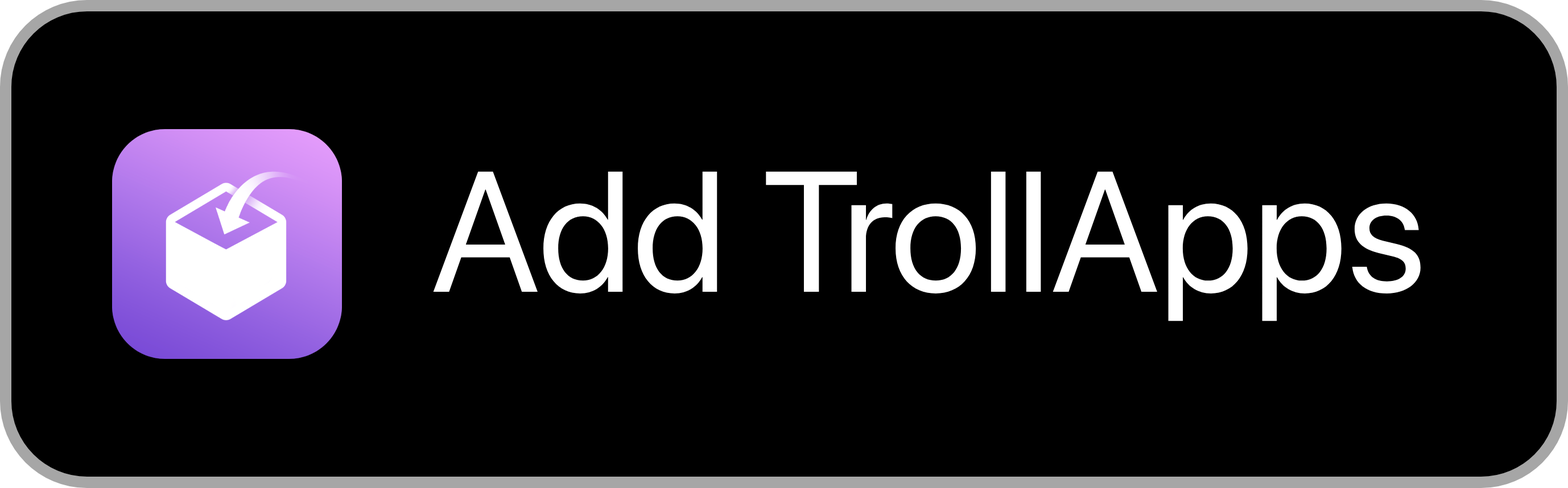
<style>
.page{position:relative;width:1568px;height:488px;background:#000000}
.page>*{position:absolute;margin:0}
.t1{font:170.7px "SFProDisplay-Regular";color:#ffffff}
</style>
<div class="page">
<p class="t1" style="left:433px;top:171px;width:988px;height:150px">Add TrollApps</p>
</div>
